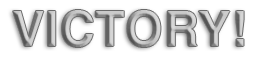
<style>
.page{position:relative;width:256px;height:59px;background:#ffffff}
.page>*{position:absolute;margin:0}
.t1{font:48px "Helvetica-Bold";letter-spacing:0.025em}
</style>
<div class="page">
<p class="t1" style="left:13px;top:10px;width:231px;height:37px">VICTORY!</p>
</div>
